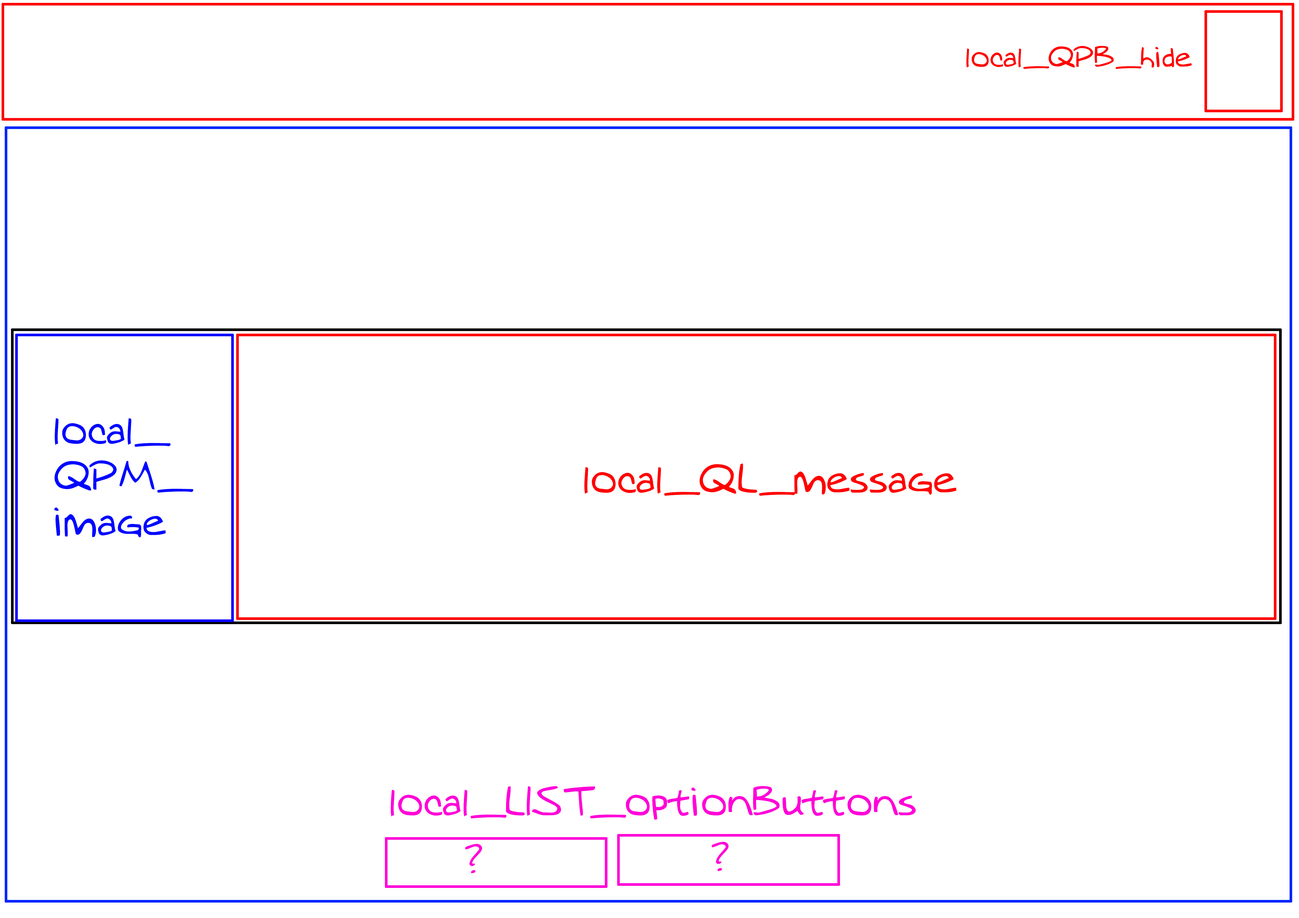
<style>
.page{position:relative;width:1299px;height:918px;background:#ffffff}
.page>*{position:absolute;margin:0}
.t1{font:27.3px "MTOaugie-Regular";color:#ff0000}
.t2{font:38.2px "MTOaugie-Regular";color:#0006ff}
.t3{font:38.2px "MTOaugie-Regular";color:#ff0000}
.t4{font:38.2px "MTOaugie-Regular";color:#ff00d8}
</style>
<div class="page">
<p class="t1" style="left:966px;top:46px;width:225px;height:23px">local_QPB_hide</p>
<p class="t2" style="left:54px;top:418px;width:139px;height:120px">local_<br>QPM_<br>image</p>
<p class="t3" style="left:584px;top:464px;width:372px;height:32px">local_QL_message</p>
<p class="t4" style="left:391px;top:786px;width:524px;height:34px">local_LIST_optionButtons</p>
<p class="t4" style="left:465px;top:844px;width:17px;height:29px">?</p>
<p class="t4" style="left:711px;top:842px;width:17px;height:29px">?</p>
</div>
